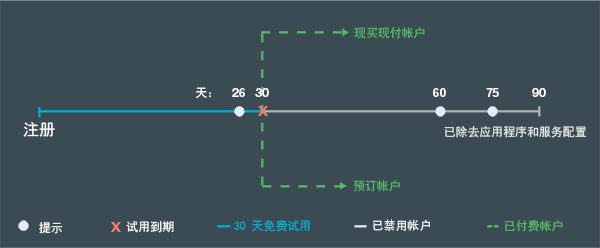
<style>
.page{position:relative;width:600px;height:248px;background:#3b4b54}
.page>*{position:absolute;margin:0}
.t1{font:11.9px "SimHei";color:#56bb66}
.t2{font:11.9px "SimHei";color:#ffffff}
.t3{font:11.9px "HelvNeueBoldforIBM";color:#ffffff}
.t4{font:12.7px "HelvNeueBoldforIBM";color:#f47d64;scale:1.17 1}
.t5{font:16px "SimHei";color:#ffffff}
.t6{font:11.9px "SimHei";color:#e5e7e8}
.t7{font:12px "SimHei";color:#ffffff}
.t8{font:11.9px "SimHei";color:#00aed1}
.t9{font:11.9px "AdobeHeitiStd-Regular";color:#dfe6eb}
</style>
<div class="page">
<p class="t1" style="left:354px;top:27px;width:71px;height:12px">现买现付帐户</p>
<p class="t2" style="left:195px;top:87px;width:16px;height:12px">天：</p>
<p class="t3" style="left:232px;top:88px;width:13px;height:9px">26</p>
<p class="t3" style="left:255px;top:88px;width:14px;height:9px">30</p>
<p class="t3" style="left:433px;top:88px;width:13px;height:9px">60</p>
<p class="t3" style="left:486px;top:88px;width:13px;height:9px">75</p>
<p class="t3" style="left:532px;top:88px;width:14px;height:9px">90</p>
<p class="t4" style="left:258px;top:106px;width:10px;height:10px">X</p>
<p class="t5" style="left:23px;top:122px;width:32px;height:15px">注册</p>
<p class="t6" style="left:444px;top:126px;width:143px;height:12px">已除去应用程序和服务配置</p>
<p class="t1" style="left:353px;top:180px;width:47px;height:12px">预订帐户</p>
<p class="t7" style="left:39px;top:222px;width:24px;height:12px">提示</p>
<p class="t4" style="left:111px;top:222px;width:10px;height:10px">X</p>
<p class="t7" style="left:126px;top:221px;width:48px;height:12px">试用到期</p>
<p class="t8" style="left:234px;top:220px;width:76px;height:12px">30 天免费试用</p>
<p class="t9" style="left:373px;top:219px;width:58px;height:12px">已禁用帐户</p>
<p class="t1" style="left:504px;top:220px;width:59px;height:12px">已付费帐户</p>
</div>
